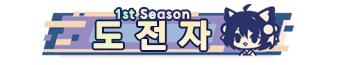
<style>
.page{position:relative;width:338px;height:65px;background:#ffffff}
.page>*{position:absolute;margin:0}
.t1{font:12px "NEXONLv1GothicOTFBold";letter-spacing:0.08em;font-weight:bold}
.t2{font:32px "NEXONLv1GothicOTFBold";letter-spacing:0.38em;color:#fff1c7;font-weight:bold}
</style>
<div class="page">
<p class="t1" style="left:115px;top:9px;width:75px;height:10px">1st Season</p>
<p class="t2" style="left:93px;top:20px;width:118px;height:31px">도전자</p>
</div>
